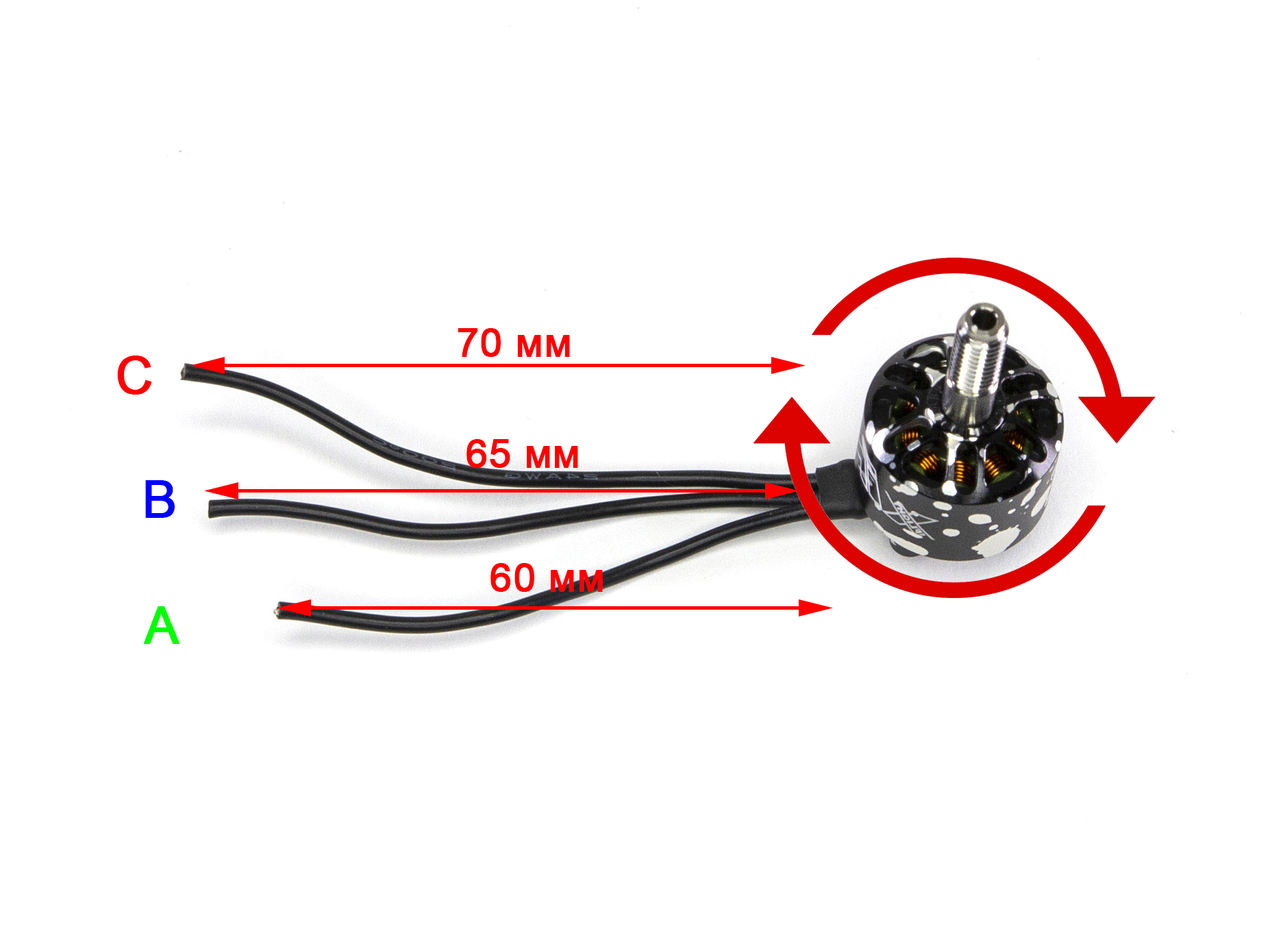
<style>
.page{position:relative;width:1261px;height:946px;background:#ffffff}
.page>*{position:absolute;margin:0}
.t1{font:39.9px "ArialMT";color:#ff0000;font-weight:bold}
.t2{font:51.4px "ArialMT";color:#ff0000;font-weight:bold}
.t3{font:51.4px "ArialMT";color:#0000ff;font-weight:bold}
.t4{font:51.4px "ArialMT";color:#00ff00;font-weight:bold}
</style>
<div class="page">
<p class="t1" style="left:457px;top:328px;width:113px;height:29px">70 мм</p>
<p class="t2" style="left:117px;top:355px;width:35px;height:39px">C</p>
<p class="t1" style="left:466px;top:439px;width:112px;height:29px">65 мм</p>
<p class="t3" style="left:145px;top:480px;width:30px;height:38px">B</p>
<p class="t1" style="left:490px;top:563px;width:113px;height:29px">60 мм</p>
<p class="t4" style="left:143px;top:606px;width:37px;height:38px">A</p>
</div>
